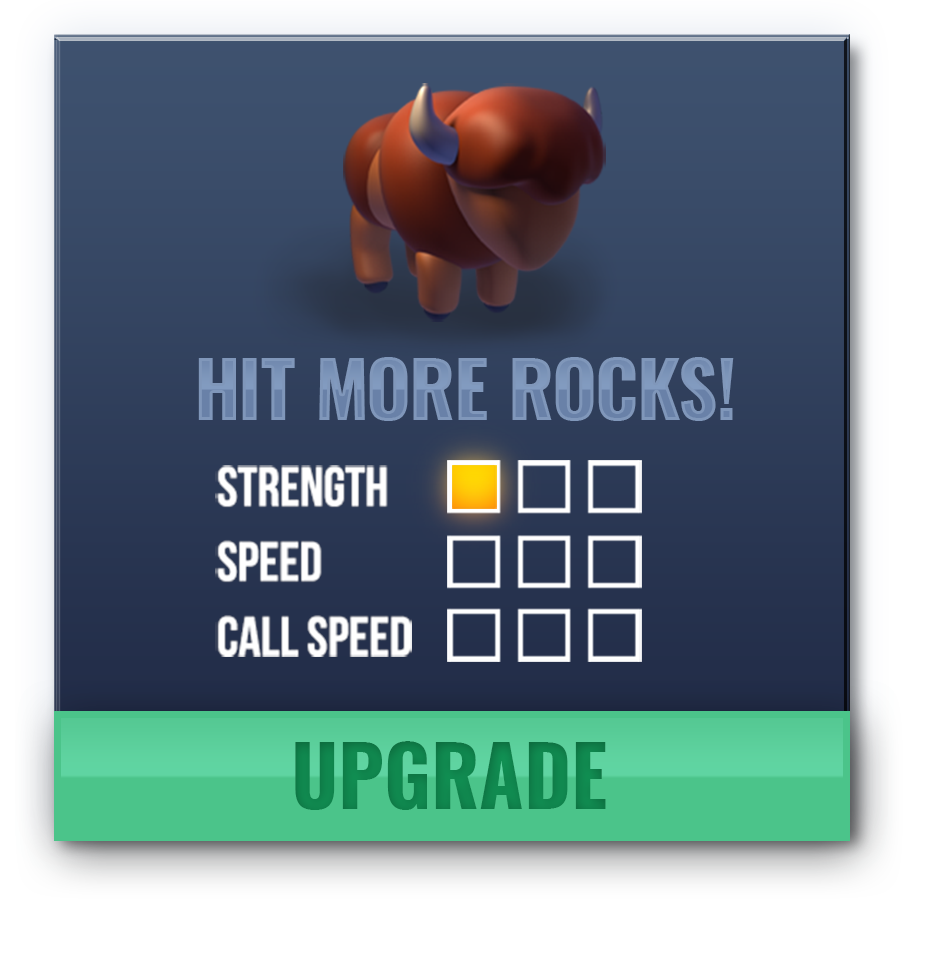
<style>
.page{position:relative;width:927px;height:964px}
.page>*{position:absolute;margin:0}
.t1{font:77.4px "Oswald-Bold";color:#6981a8}
.t2{font:55.4px/74.9px "BebasNeue";color:#ffffff}
.t3{font:81.5px "Oswald-Bold";letter-spacing:-0.005em;color:#119355}
</style>
<div class="page">
<p class="t1" style="left:198px;top:357px;width:536px;height:64px">HIT MORE ROCKS!</p>
<p class="t2" style="left:215px;top:465px;width:197px;height:192px">Strength<br>Speed<br>Call Speed</p>
<p class="t3" style="left:295px;top:741px;width:311px;height:69px">UPGRADE</p>
</div>
